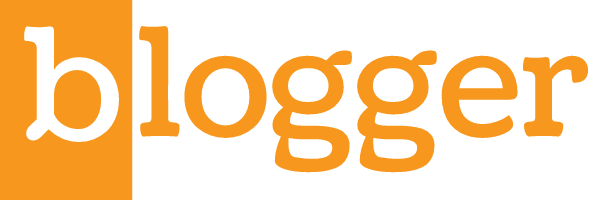
<style>
.page{position:relative;width:600px;height:200px;background:#ffffff}
.page>*{position:absolute;margin:0}
.t1{font:155px "Coustard-Regular";color:#ffffff}
.t2{font:150px "Coustard-Regular";color:#f7971e}
</style>
<div class="page">
<p class="t1" style="left:24px;top:26px;width:95px;height:117px">b</p>
<p class="t2" style="left:139px;top:26px;width:450px;height:147px">logger</p>
</div>
